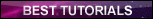
<style>
.page{position:relative;width:153px;height:19px}
.page>*{position:absolute;margin:0}
.t1{font:12.7px "Arial-BoldMT";color:#ffffff}
</style>
<div class="page">
<p class="t1" style="left:23px;top:5px;width:109px;height:11px">BEST TUTORIALS</p>
</div>
